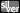
<style>
.page{position:relative;width:20px;height:13px;background:#747474}
.page>*{position:absolute;margin:0}
.t1{font:10px "2002L";letter-spacing:-0.025em;color:#ffffff;scale:0.9 1}
</style>
<div class="page">
<p class="t1" style="left:1px;top:0px;width:9px;height:9px">sil</p>
<p class="t1" style="left:5px;top:6px;width:14px;height:7px">ver</p>
</div>
